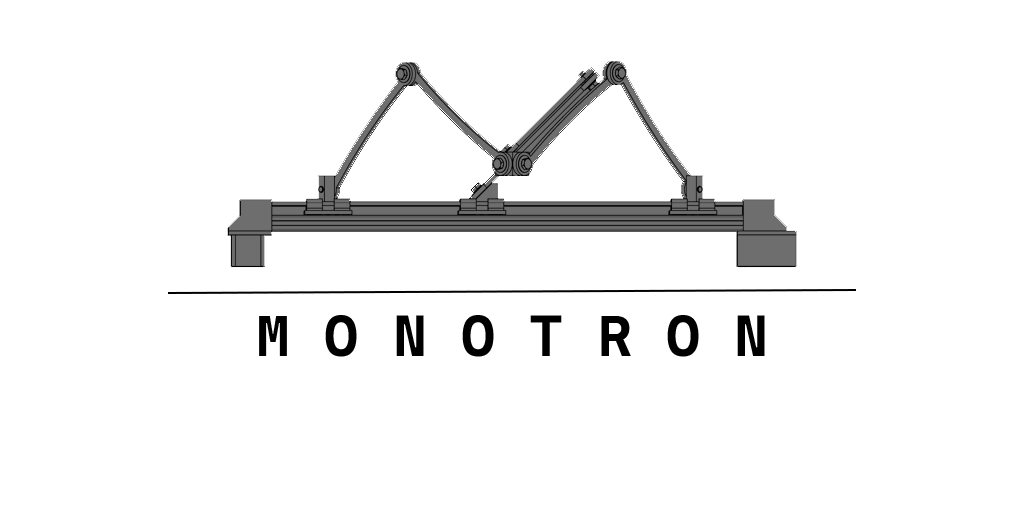
<style>
.page{position:relative;width:1024px;height:512px;background:#ffffff}
.page>*{position:absolute;margin:0}
.t1{font:58.3px "CascadiaMonoRoman-Bold";color:#000000}
</style>
<div class="page">
<p class="t1" style="left:259px;top:315px;width:506px;height:42px">M O N O T R O N</p>
</div>
